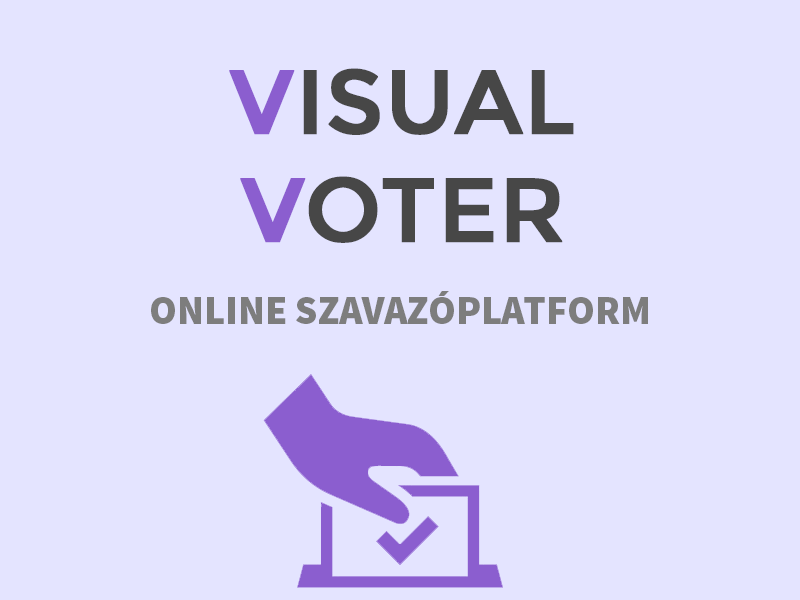
<style>
.page{position:relative;width:800px;height:600px;background:#e4e4ff}
.page>*{position:absolute;margin:0}
.t1{font:90px "Montserrat-Regular";color:#474747;text-transform:uppercase;font-weight:bold}
.t2{font:90px "Montserrat-Regular";color:#8b5ecf;text-transform:uppercase;font-weight:bold}
.t3{font:40px "SourceSansPro-Black";color:#7d7d7d;text-transform:uppercase}
</style>
<div class="page">
<p class="t1" style="left:229px;top:68px;width:345px;height:175px;text-align:center"><span class="t2">v</span>isual<br><span class="t2">v</span>oter</p>
<p class="t3" style="left:151px;top:291px;width:497px;height:33px">online szavazóplatform</p>
</div>
